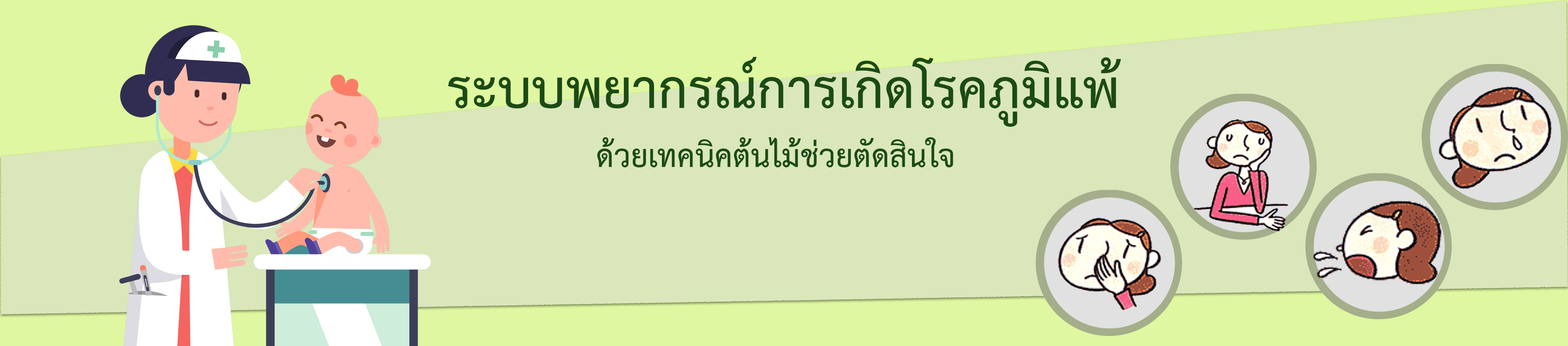
<style>
.page{position:relative;width:1568px;height:346px;background:#dae7ba}
.page>*{position:absolute;margin:0}
.t1{font:76.6px "THSarabunITù-Bold";color:#1b4b15}
.t2{font:44.8px "THSarabunITù-Bold";color:#1b4b15}
</style>
<div class="page">
<p class="t1" style="left:448px;top:57px;width:673px;height:70px">ระบบพยากรณ์การเกิดโรคภูมิแพ้</p>
<p class="t2" style="left:597px;top:137px;width:356px;height:30px">ด้วยเทคนิคต้นไม้ช่วยตัดสินใจ</p>
</div>
